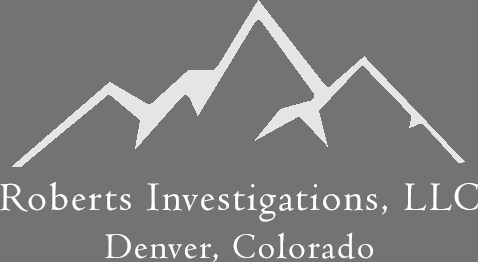
<style>
.page{position:relative;width:478px;height:262px;background:#737373}
.page>*{position:absolute;margin:0}
.t1{font:41.7px "Centaur";letter-spacing:0.05em;color:#ffffff}
.t2{font:37.5px "Centaur";letter-spacing:0.05em;color:#ffffff}
</style>
<div class="page">
<p class="t1" style="left:0px;top:182px;width:478px;height:40px">Roberts Investigations, LLC</p>
<p class="t2" style="left:105px;top:232px;width:268px;height:30px">Denver, Colorado</p>
</div>
